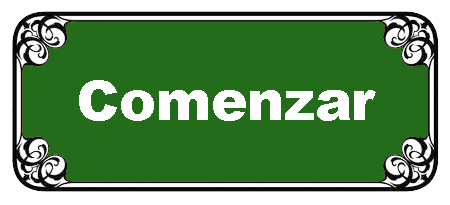
<style>
.page{position:relative;width:450px;height:205px;background:#226c1a}
.page>*{position:absolute;margin:0}
.t1{font:55px "Arial-Black";color:#ffffff}
</style>
<div class="page">
<p class="t1" style="left:79px;top:80px;width:297px;height:41px">Comenzar</p>
</div>
